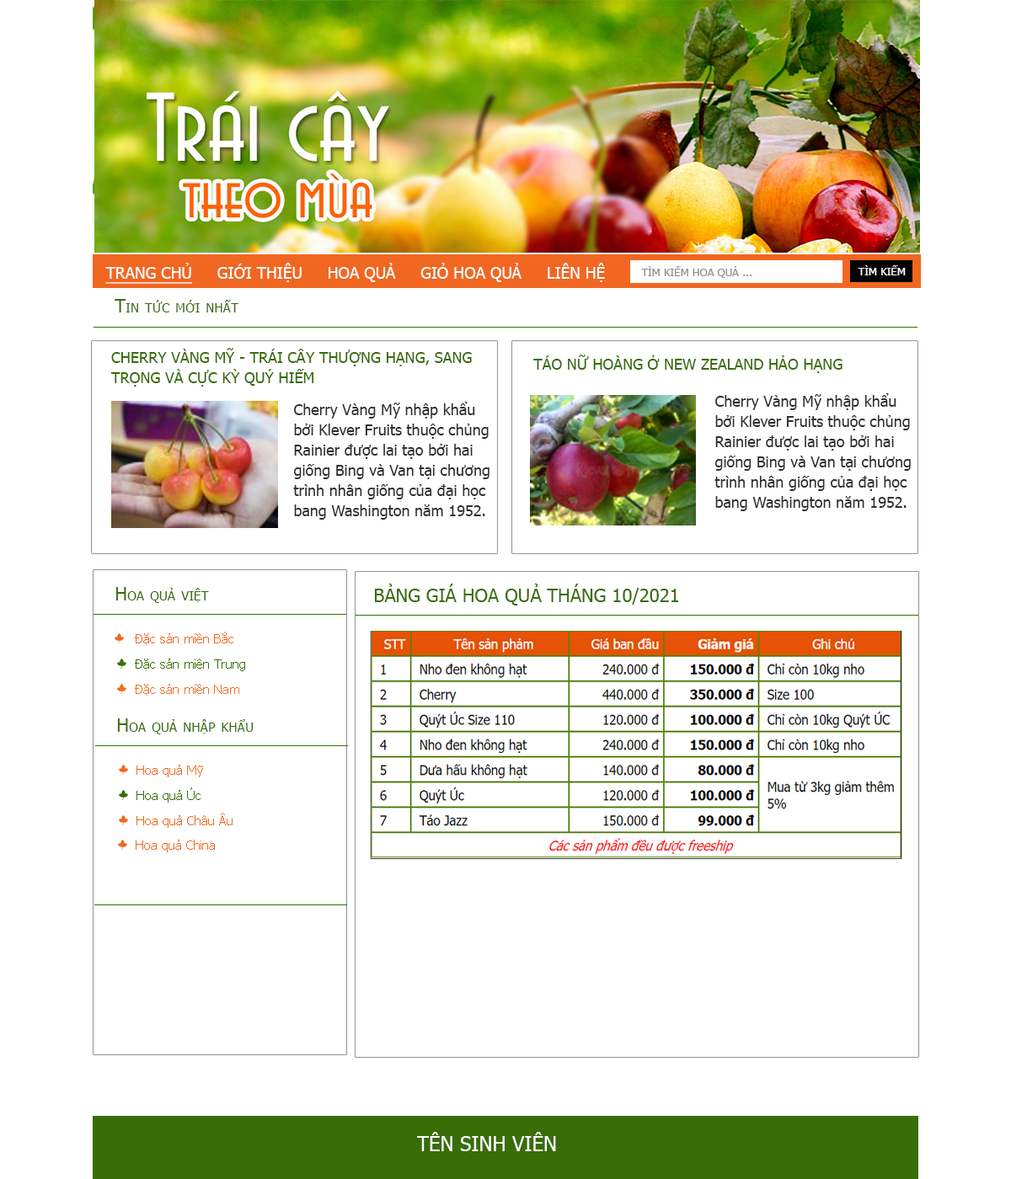
<style>
.page{position:relative;width:1011px;height:1179px;background:#ffffff}
.page>*{position:absolute;margin:0}
.t1{font:16px "Tahoma";color:#ffffff}
.t2{font:16px "Tahoma";color:#ffffff;text-decoration:underline}
.t3{font:11px "Tahoma";color:#938d8d}
.t4{font:11px "Tahoma";color:#ffffff}
.t5{font:18.5px "Tahoma";color:#386d08;font-variant:small-caps}
.t6{font:15.2px/20.2px "Tahoma";color:#386d08;font-variant:small-caps}
.t7{font:15.2px "Tahoma";color:#386d08;font-variant:small-caps}
.t8{font:15.2px/20.2px "Tahoma";color:#2e2e2d}
.t9{font:12.6px "Tahoma";color:#f16721}
.t10{font:12.6px "Tahoma";color:#386d08}
.t11{font:12.6px "Tahoma";color:#f16e2b}
.t12{font:20.2px "Tahoma";color:#ffffff}
</style>
<div class="page">
<p class="t1" style="left:105px;top:263px;width:500px;height:21px"><span class="t2">TRANG CHỦ</span>     GIỚI THIỆU     HOA QUẢ     GIỎ HOA QUẢ     LIÊN HỆ</p>
<p class="t3" style="left:641px;top:266px;width:110px;height:12px">TÌM KIẾM HOA QUẢ ...</p>
<p class="t4" style="left:858px;top:265px;width:48px;height:10px">TÌM KIẾM</p>
<p class="t5" style="left:115px;top:299px;width:124px;height:14px">Tin tức mới nhất</p>
<p class="t6" style="left:110px;top:348px;width:362px;height:39px">CHERRY VÀNG MỸ - TRÁI CÂY THƯỢNG HẠNG, SANG <br>TRỌNG VÀ CỰC KỲ QUÝ HIẾM</p>
<p class="t7" style="left:533px;top:355px;width:309px;height:18px">TÁO NỮ HOÀNG Ở NEW ZEALAND HẢO HẠNG</p>
<p class="t8" style="left:293px;top:402px;width:196px;height:118px">Cherry Vàng Mỹ nhập khẩu <br>bởi Klever Fruits thuộc chủng<br>Rainier được lai tạo bởi hai <br>giống Bing và Van tại chương<br>trình nhân giống của đại học <br>bang Washington năm 1952.</p>
<p class="t8" style="left:714px;top:393px;width:197px;height:118px">Cherry Vàng Mỹ nhập khẩu <br>bởi Klever Fruits thuộc chủng <br>Rainier được lai tạo bởi hai <br>giống Bing và Van tại chương <br>trình nhân giống của đại học <br>bang Washington năm 1952.</p>
<p class="t5" style="left:115px;top:587px;width:94px;height:16px">Hoa quả việt</p>
<p class="t5" style="left:374px;top:584px;width:305px;height:22px">BẢNG GIÁ HOA QUẢ THÁNG 10/2021</p>
<p class="t9" style="left:135px;top:632px;width:98px;height:13px">Đặc sản miền Bắc</p>
<p class="t10" style="left:135px;top:659px;width:110px;height:12px">Đặc sản miên Trung</p>
<p class="t11" style="left:135px;top:684px;width:104px;height:12px">Đặc sản miền Nam</p>
<p class="t5" style="left:117px;top:719px;width:137px;height:16px">Hoa quả nhập khẩu</p>
<p class="t9" style="left:136px;top:765px;width:67px;height:13px">Hoa quả Mỹ</p>
<p class="t10" style="left:136px;top:788px;width:65px;height:15px">Hoa quả Úc</p>
<p class="t9" style="left:136px;top:813px;width:97px;height:15px">Hoa quả Châu Âu</p>
<p class="t9" style="left:136px;top:840px;width:79px;height:13px">Hoa quả China</p>
<p class="t12" style="left:417px;top:1132px;width:139px;height:20px">TÊN SINH VIÊN</p>
</div>
